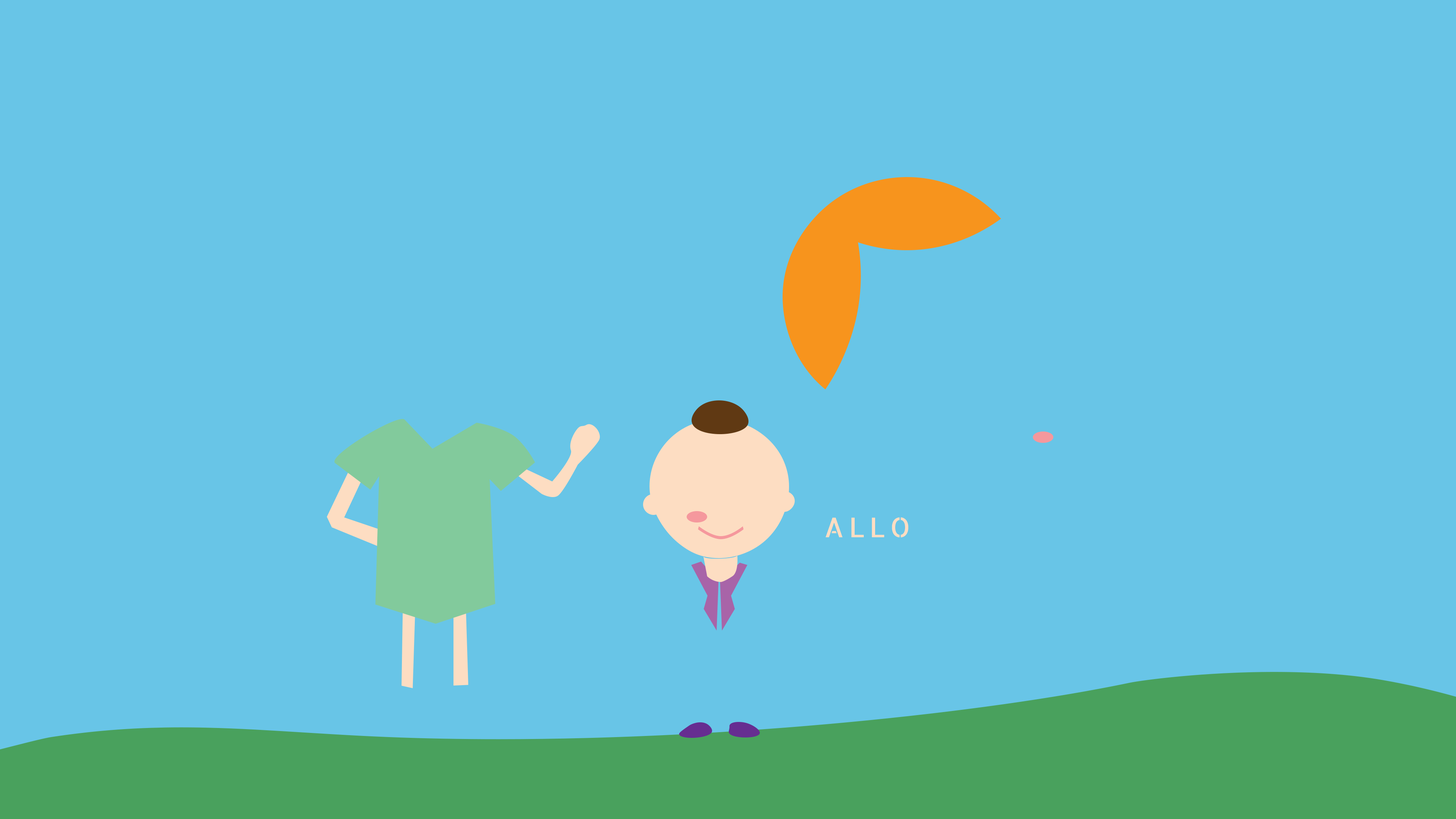
<style>
.page{position:relative;width:1456px;height:819px;background:#68c5e7}
.page>*{position:absolute;margin:0}
.t1{font:27.3px "AllertaStencil-Regular";letter-spacing:0.18em;color:#fdddc2}
</style>
<div class="page">
<p class="t1" style="left:825px;top:517px;width:83px;height:21px">ALLO</p>
</div>
